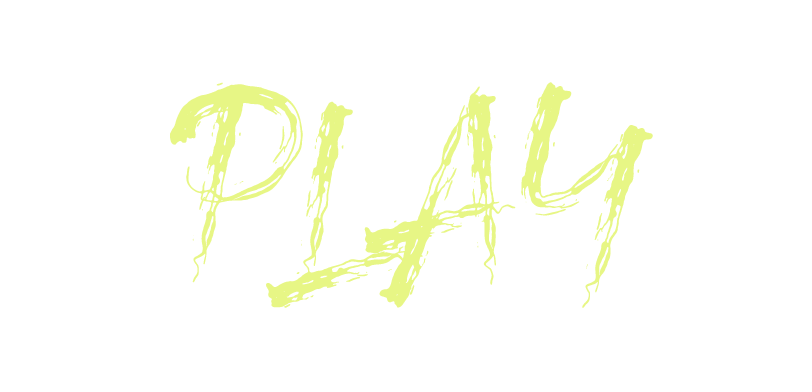
<style>
.page{position:relative;width:812px;height:392px;background:#ffffff}
.page>*{position:absolute;margin:0}
.t1{font:250px "BloodScratchPersonalUse";color:#e7f685}
</style>
<div class="page">
<p class="t1" style="left:170px;top:82px;width:483px;height:226px">Play</p>
</div>
